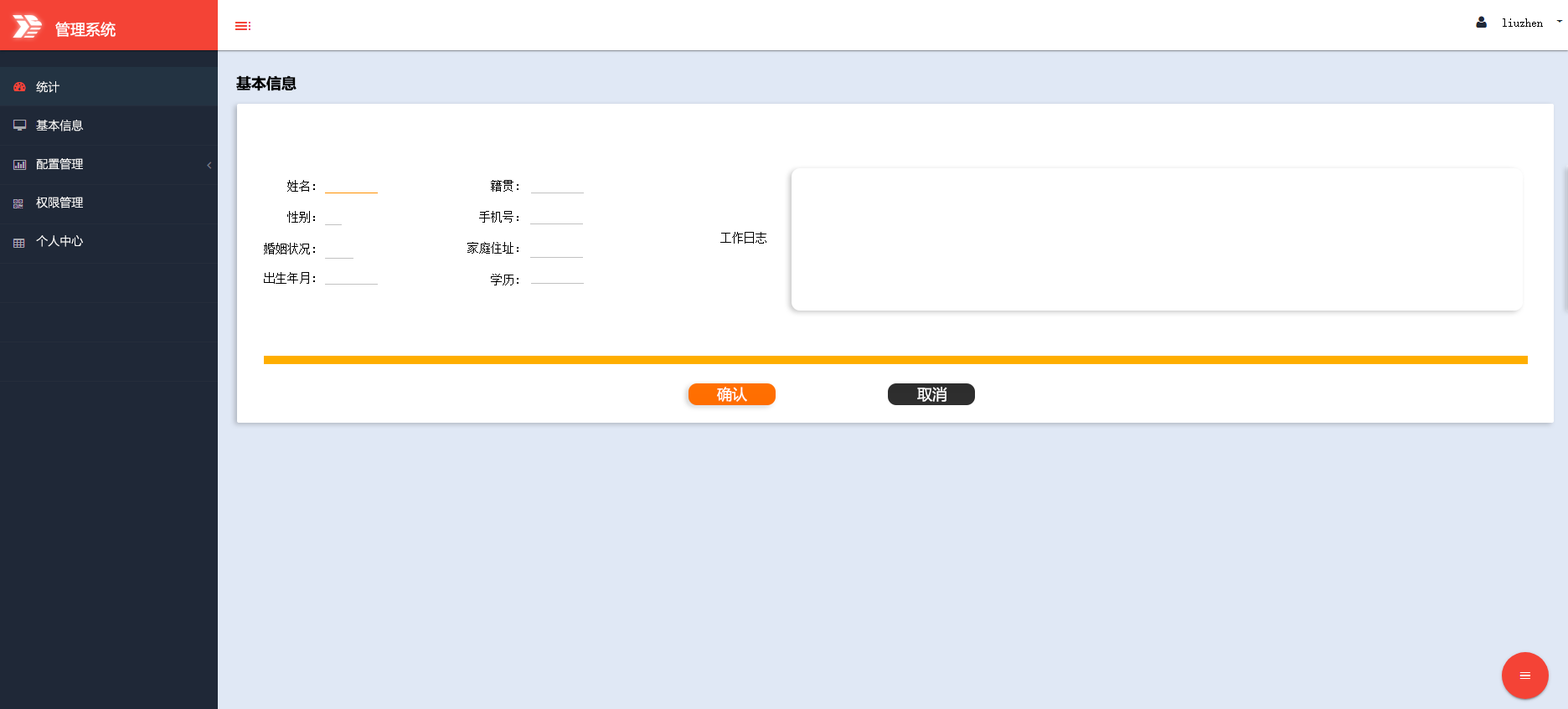
<style>
.page{position:relative;width:1568px;height:709px;background:#ffffff}
.page>*{position:absolute;margin:0}
.t1{font:15.1px "MicrosoftYaHei";color:#ffffff}
.t2{font:11.7px "SimSun";color:#000000}
.t3{font:15.1px "MicrosoftYaHei-Bold";color:#000000}
.t4{font:11.7px "MicrosoftYaHeiLight";color:#ffffff}
.t5{font:15.1px "MicrosoftYaHei";color:#fffefe}
</style>
<div class="page">
<p class="t1" style="left:55px;top:22px;width:61px;height:15px">管理系统</p>
<p class="t2" style="left:1503px;top:18px;width:40px;height:9px">liuzhen</p>
<p class="t3" style="left:236px;top:75px;width:61px;height:16px">基本信息</p>
<p class="t4" style="left:36px;top:81px;width:23px;height:12px">统计</p>
<p class="t4" style="left:36px;top:120px;width:48px;height:12px">基本信息</p>
<p class="t4" style="left:36px;top:158px;width:47px;height:12px">配置管理</p>
<p class="t2" style="left:287px;top:180px;width:28px;height:12px">姓名:</p>
<p class="t2" style="left:491px;top:180px;width:27px;height:12px">籍贯:</p>
<p class="t4" style="left:36px;top:197px;width:47px;height:12px">权限管理</p>
<p class="t2" style="left:287px;top:211px;width:28px;height:12px">性别：</p>
<p class="t2" style="left:479px;top:211px;width:39px;height:12px">手机号：</p>
<p class="t2" style="left:720px;top:232px;width:46px;height:12px">工作日志</p>
<p class="t4" style="left:36px;top:235px;width:47px;height:12px">个人中心</p>
<p class="t2" style="left:264px;top:243px;width:51px;height:12px">婚姻状况:</p>
<p class="t2" style="left:467px;top:242px;width:51px;height:12px">家庭住址：</p>
<p class="t2" style="left:264px;top:272px;width:51px;height:12px">出生年月:</p>
<p class="t2" style="left:491px;top:274px;width:27px;height:12px">学历:</p>
<p class="t5" style="left:717px;top:387px;width:30px;height:15px">确认</p>
<p class="t1" style="left:917px;top:387px;width:30px;height:15px">取消</p>
</div>
